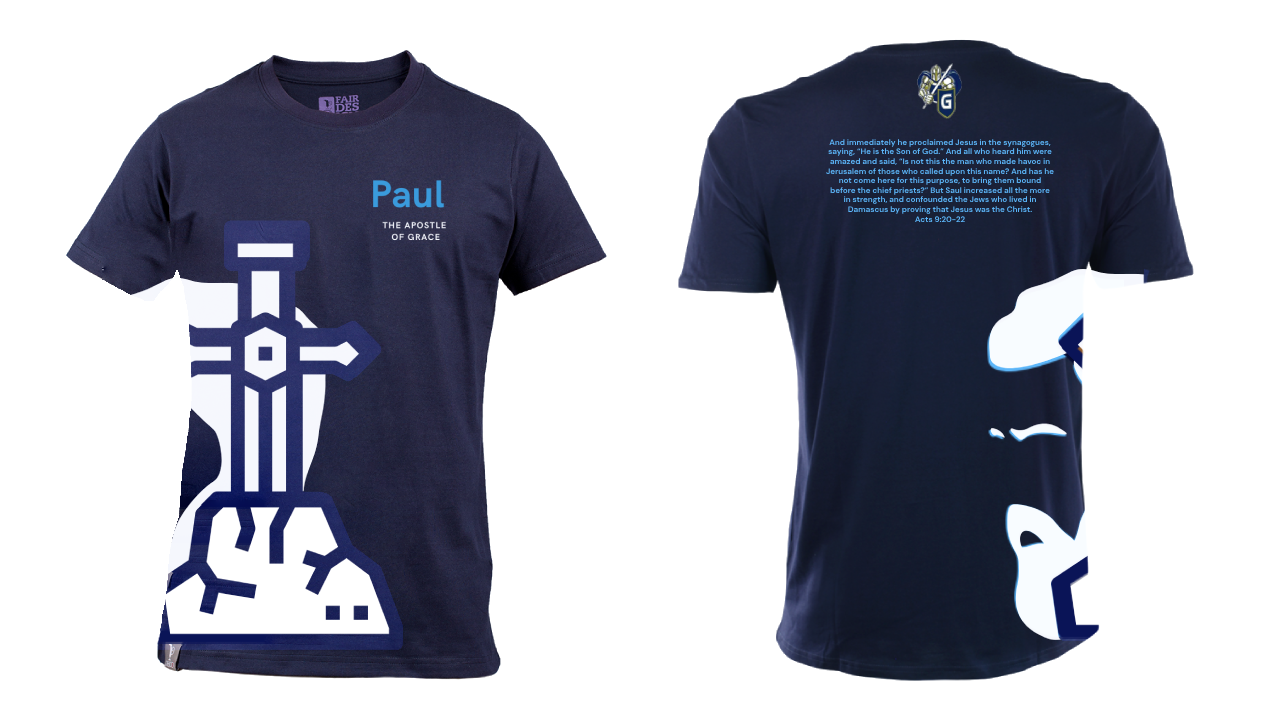
<style>
.page{position:relative;width:1280px;height:720px;background:#ffffff}
.page>*{position:absolute;margin:0}
.t1{font:8px "DMSans-Bold";color:#5cb6f9}
</style>
<div class="page">
<p class="t1" style="left:826px;top:139px;width:228px;height:84px;text-align:center">And immediately he proclaimed Jesus in the synagogues, saying, “He is the Son of God.” And all who heard him were amazed and said, “Is not this the man who made havoc in Jerusalem of those who called upon this name? And has he not come here for this purpose, to bring them bound before the chief priests?” But Saul increased all the more in strength, and confounded the Jews who lived in Damascus by proving that Jesus was the Christ.<br>Acts 9:20-22</p>
</div>
